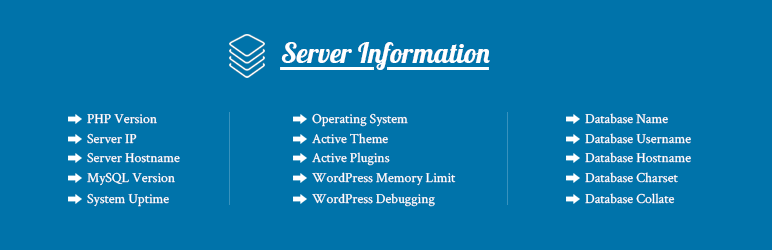
<style>
.page{position:relative;width:772px;height:250px;background:#0073aa}
.page>*{position:absolute;margin:0}
.t1{font:28.2px "Lobster-Regular";color:#ffffff}
.t2{font:13.8px "CrimsonText-Regular";color:#ffffff}
</style>
<div class="page">
<p class="t1" style="left:281px;top:42px;width:209px;height:28px">Server Information</p>
<p class="t2" style="left:312px;top:113px;width:96px;height:14px">Operating System</p>
<p class="t2" style="left:585px;top:113px;width:83px;height:11px">Database Name</p>
<p class="t2" style="left:87px;top:114px;width:70px;height:10px">PHP Version</p>
<p class="t2" style="left:87px;top:133px;width:50px;height:11px">Server IP</p>
<p class="t2" style="left:312px;top:133px;width:76px;height:11px">Active Theme</p>
<p class="t2" style="left:585px;top:133px;width:106px;height:11px">Database Username</p>
<p class="t2" style="left:87px;top:152px;width:93px;height:11px">Server Hostname</p>
<p class="t2" style="left:312px;top:152px;width:78px;height:14px">Active Plugins</p>
<p class="t2" style="left:585px;top:152px;width:106px;height:11px">Database Hostname</p>
<p class="t2" style="left:87px;top:172px;width:88px;height:14px">MySQL Version</p>
<p class="t2" style="left:312px;top:172px;width:144px;height:14px">WordPress Memory Limit</p>
<p class="t2" style="left:585px;top:172px;width:93px;height:11px">Database Charset</p>
<p class="t2" style="left:87px;top:193px;width:82px;height:14px">System Uptime</p>
<p class="t2" style="left:312px;top:193px;width:123px;height:14px">WordPress Debugging</p>
<p class="t2" style="left:585px;top:193px;width:90px;height:11px">Database Collate</p>
</div>
